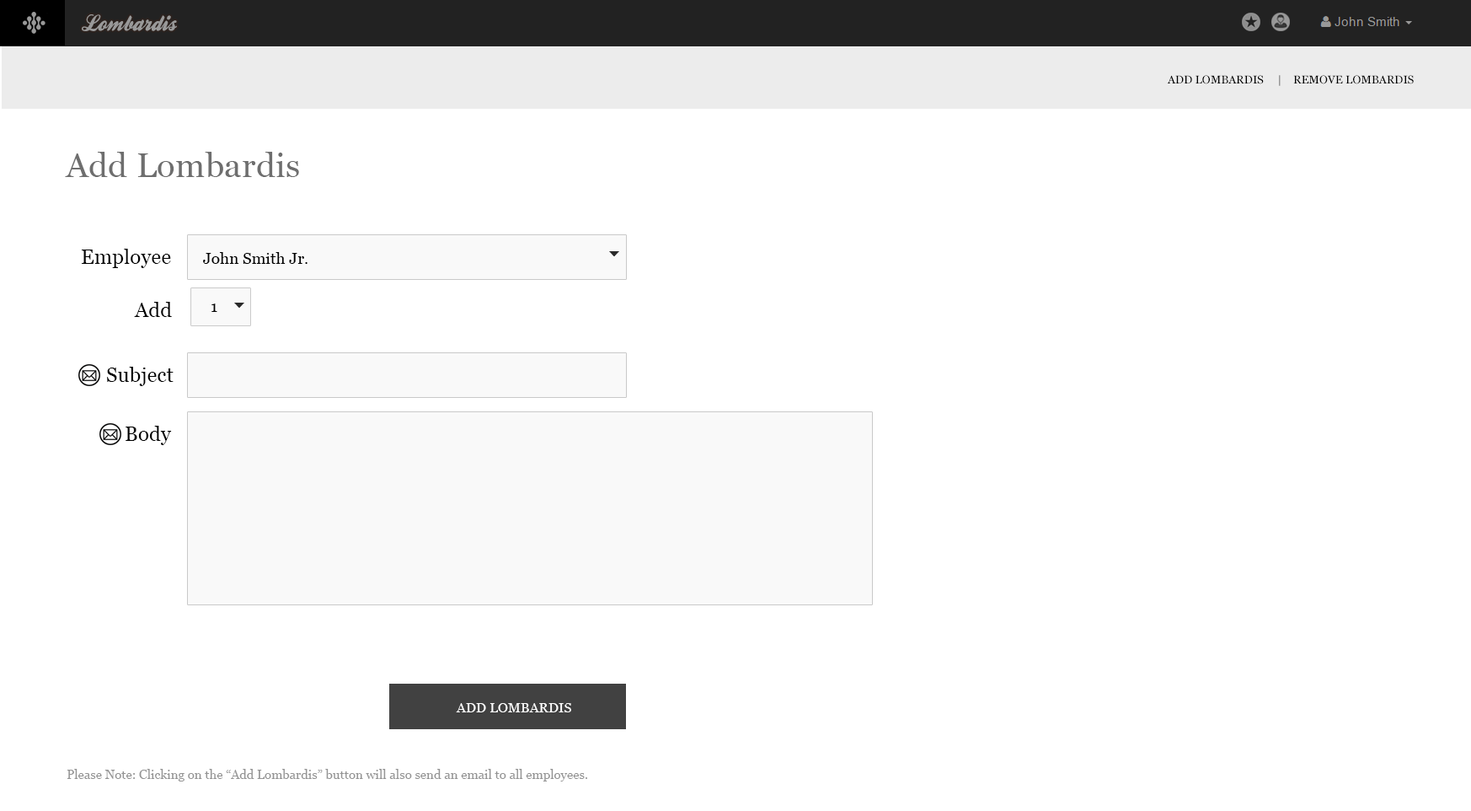
<style>
.page{position:relative;width:1471px;height:811px;background:#ffffff}
.page>*{position:absolute;margin:0}
.t1{font:23.4px "BallparkWeiner";color:#999999;scale:0.96 1}
.t2{font:11.2px "Georgia";letter-spacing:0.01em;color:#000000}
.t3{font:33.7px "Georgia";letter-spacing:0.01em;color:#6e6e6e}
.t4{font:20.2px "Georgia";letter-spacing:0.01em;color:#000000}
.t5{font:15.7px "Georgia";letter-spacing:0.01em;color:#000000}
.t6{font:13.5px "Georgia";letter-spacing:0.01em;color:#ffffff}
.t7{font:12.4px "Georgia";letter-spacing:0.01em;color:#949494}
</style>
<div class="page">
<p class="t1" style="left:82px;top:14px;width:95px;height:17px">Lombardis</p>
<p class="t2" style="left:1167px;top:75px;width:247px;height:11px">ADD LOMBARDIS     |    REMOVE LOMBARDIS</p>
<p class="t3" style="left:65px;top:152px;width:234px;height:25px">Add Lombardis</p>
<p class="t4" style="left:82px;top:249px;width:89px;height:19px">Employee</p>
<p class="t5" style="left:203px;top:252px;width:105px;height:12px">John Smith Jr.</p>
<p class="t4" style="left:134px;top:302px;width:38px;height:15px">Add</p>
<p class="t5" style="left:211px;top:303px;width:6px;height:9px">1</p>
<p class="t4" style="left:107px;top:367px;width:67px;height:19px">Subject</p>
<p class="t4" style="left:126px;top:425px;width:46px;height:20px">Body</p>
<p class="t6" style="left:456px;top:703px;width:115px;height:9px">ADD LOMBARDIS</p>
<p class="t7" style="left:67px;top:768px;width:520px;height:13px">Please Note: Clicking on the “Add Lombardis” button will also send an email to all employees.</p>
</div>
